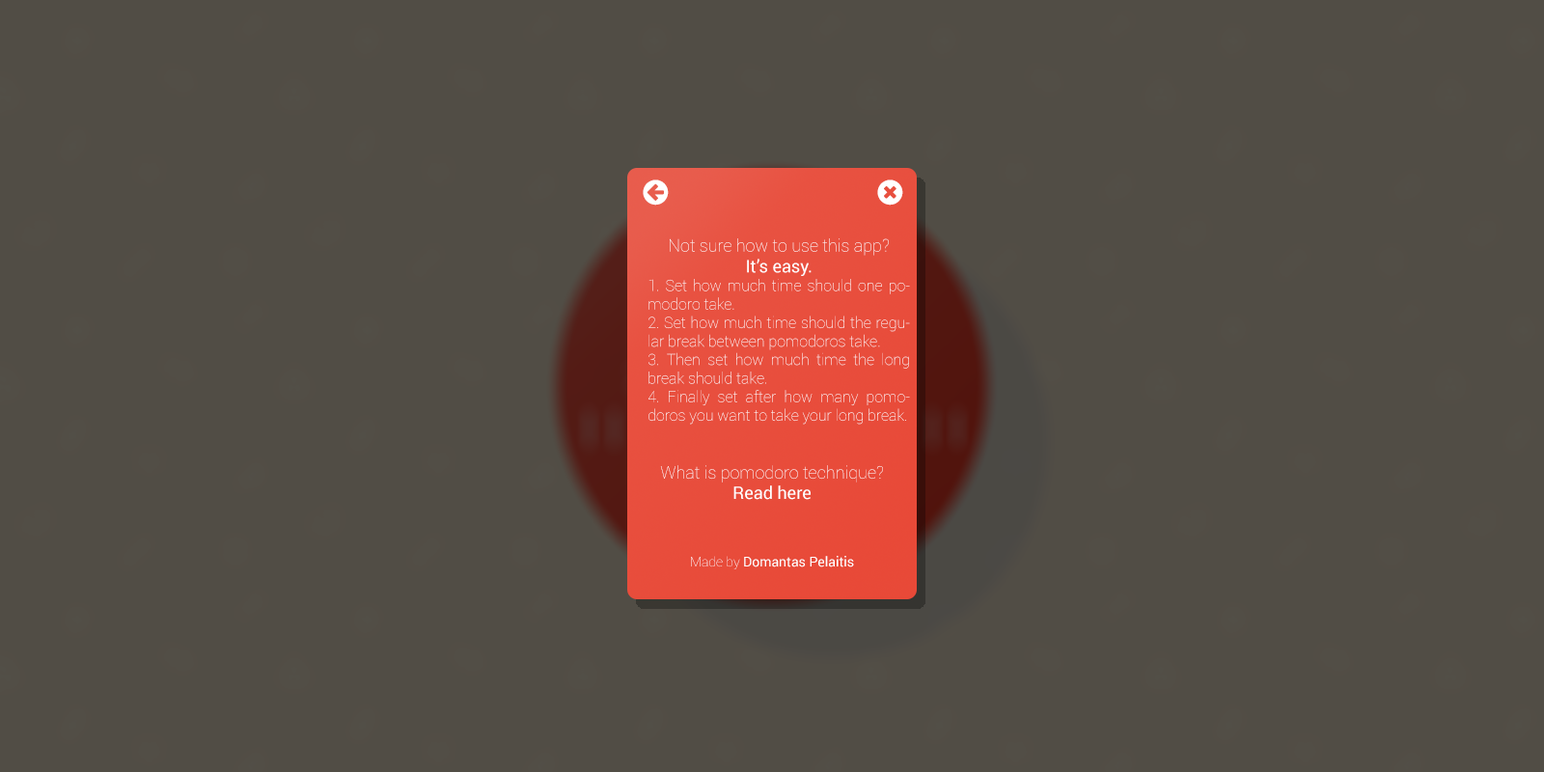
<style>
.page{position:relative;width:1544px;height:772px;background:#514d45}
.page>*{position:absolute;margin:0}
.t1{font:15.4px "Roboto-Thin";color:#ffffff}
.t2{font:17.4px "Roboto-Thin";color:#ffffff}
.t3{font:17.4px "Roboto-Regular";color:#ffffff}
.t4{font:13.5px "Roboto-Regular";color:#ffffff}
.t5{font:13.5px "Roboto-Thin";color:#ffffff}
</style>
<div class="page">
<p class="t1" style="left:649px;top:238px;width:261px;height:187px;text-align:center"><span class="t2">Not sure how to use this app?<br></span><span class="t3">It’s easy.<br></span>1. Set how much time should one pomodoro take.<br>2. Set how much time should the regular break between pomodoros take.<br>3. Then set how much time the long break should take.<br>4. Finally set after how many pomodoros you want to take your long break.</p>
<p class="t2" style="left:660px;top:465px;width:223px;height:35px;text-align:center">What is pomodoro technique? <span class="t3">Read here</span></p>
<p class="t4" style="left:691px;top:556px;width:163px;height:13px"><span class="t5">Made by </span>Domantas Pelaitis</p>
</div>
